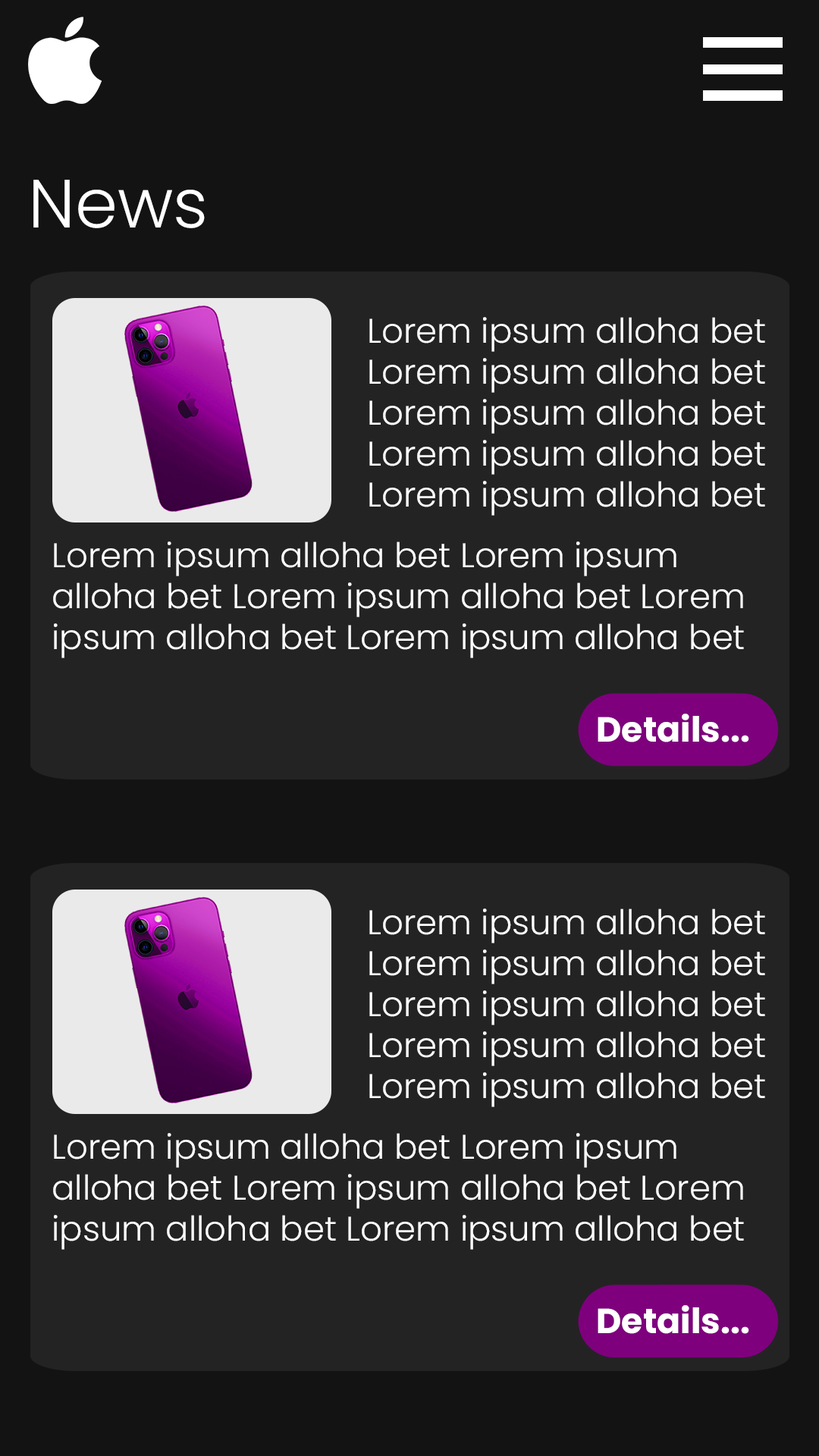
<style>
.page{position:relative;width:819px;height:1456px;background:#232323}
.page>*{position:absolute;margin:0}
.t1{font:68.2px "Poppins-Light";color:#ffffff}
.t2{font:34.1px "Poppins-Light";color:#ffffff}
.t3{font:34.9px "Poppins-Bold";color:#ffffff}
</style>
<div class="page">
<p class="t1" style="left:33px;top:180px;width:172px;height:48px">News</p>
<p class="t2" style="left:369px;top:317px;width:396px;height:199px">Lorem ipsum alloha bet<br>Lorem ipsum alloha bet<br>Lorem ipsum alloha bet<br>Lorem ipsum alloha bet<br>Lorem ipsum alloha bet</p>
<p class="t2" style="left:53px;top:541px;width:691px;height:117px">Lorem ipsum alloha bet Lorem ipsum <br>alloha bet Lorem ipsum alloha bet Lorem <br>ipsum alloha bet Lorem ipsum alloha bet</p>
<p class="t3" style="left:598px;top:714px;width:151px;height:28px">Details...</p>
<p class="t2" style="left:369px;top:908px;width:396px;height:199px">Lorem ipsum alloha bet<br>Lorem ipsum alloha bet<br>Lorem ipsum alloha bet<br>Lorem ipsum alloha bet<br>Lorem ipsum alloha bet</p>
<p class="t2" style="left:53px;top:1133px;width:691px;height:117px">Lorem ipsum alloha bet Lorem ipsum <br>alloha bet Lorem ipsum alloha bet Lorem <br>ipsum alloha bet Lorem ipsum alloha bet</p>
<p class="t3" style="left:598px;top:1305px;width:151px;height:29px">Details...</p>
</div>
